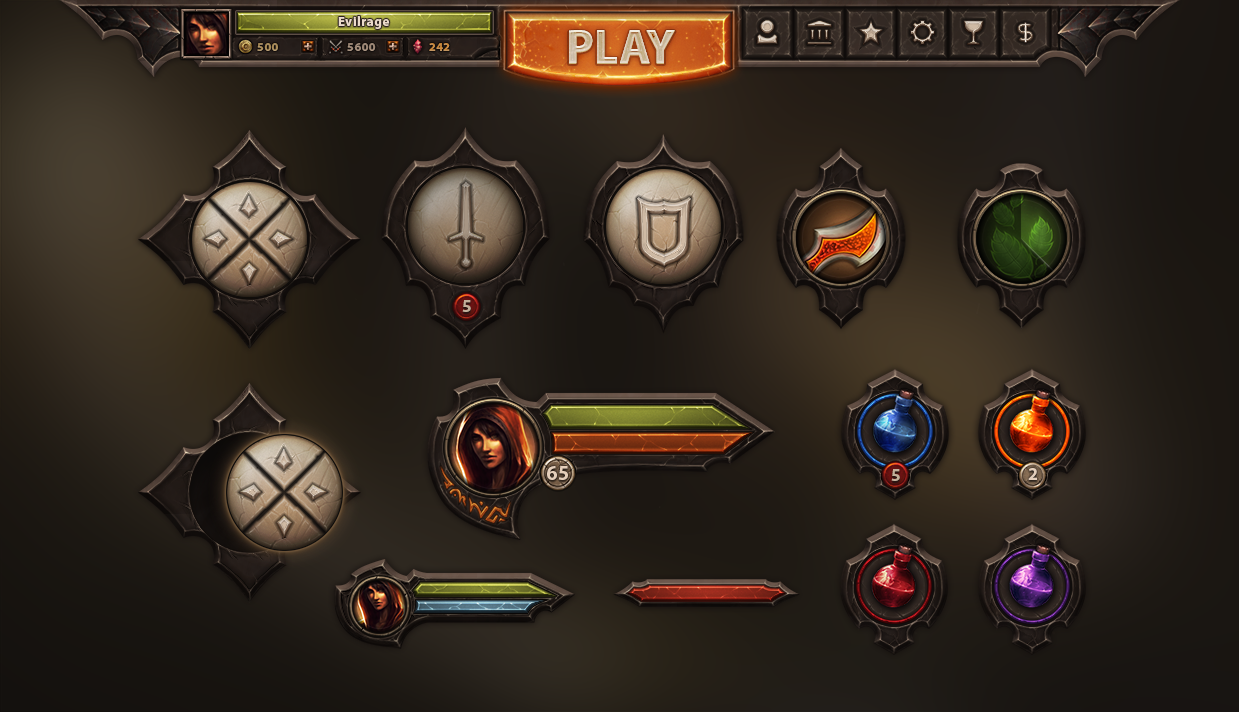
<style>
.page{position:relative;width:1239px;height:712px}
.page>*{position:absolute;margin:0}
.t1{font:13px "MyriadPro-Bold";letter-spacing:0.05em;color:#ebdbca}
.t2{font:48px "MyriadPro-Bold";text-transform:uppercase}
.t3{font:12px "MyriadPro-Bold";letter-spacing:0.05em;color:#a88954}
.t4{font:12px "MyriadPro-Bold";letter-spacing:0.05em;color:#9a8473}
.t5{font:12px "MyriadPro-Bold";letter-spacing:0.05em;color:#ca8636}
.t6{font:17.5px "MyriadPro-Bold";color:#c2af9b}
.t7{font:20.5px "MyriadPro-Bold";color:#e4ceba}
.t8{font:17.5px "MyriadPro-Bold";color:#e4ceba}
</style>
<div class="page">
<p class="t1" style="left:338px;top:16px;width:52px;height:13px">Evilrage</p>
<p class="t2" style="left:569px;top:30px;width:106px;height:33px">play</p>
<p class="t2" style="left:569px;top:30px;width:106px;height:33px">play</p>
<p class="t2" style="left:569px;top:31px;width:106px;height:33px">play</p>
<p class="t3" style="left:257px;top:43px;width:21px;height:8px">500</p>
<p class="t4" style="left:347px;top:43px;width:29px;height:8px">5600</p>
<p class="t5" style="left:429px;top:43px;width:21px;height:8px">242</p>
<p class="t6" style="left:462px;top:300px;width:9px;height:12px">5</p>
<p class="t7" style="left:547px;top:466px;width:21px;height:14px">65</p>
<p class="t6" style="left:891px;top:469px;width:9px;height:12px">5</p>
<p class="t8" style="left:1028px;top:468px;width:9px;height:12px">2</p>
</div>
